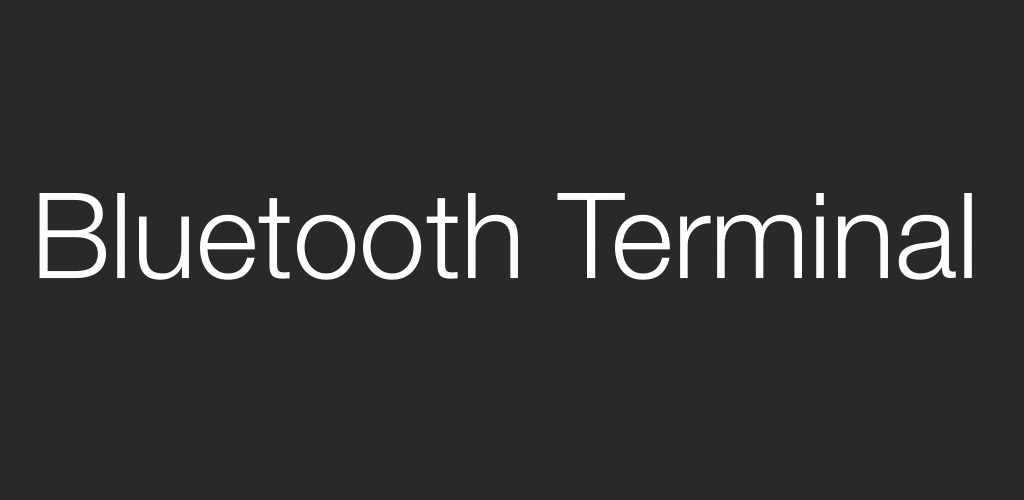
<style>
.page{position:relative;width:1024px;height:500px;background:#292929}
.page>*{position:absolute;margin:0}
.t1{font:119px "HelveticaNeue-Light";color:#ffffff}
</style>
<div class="page">
<p class="t1" style="left:39px;top:193px;width:933px;height:87px">Bluetooth Terminal</p>
</div>
